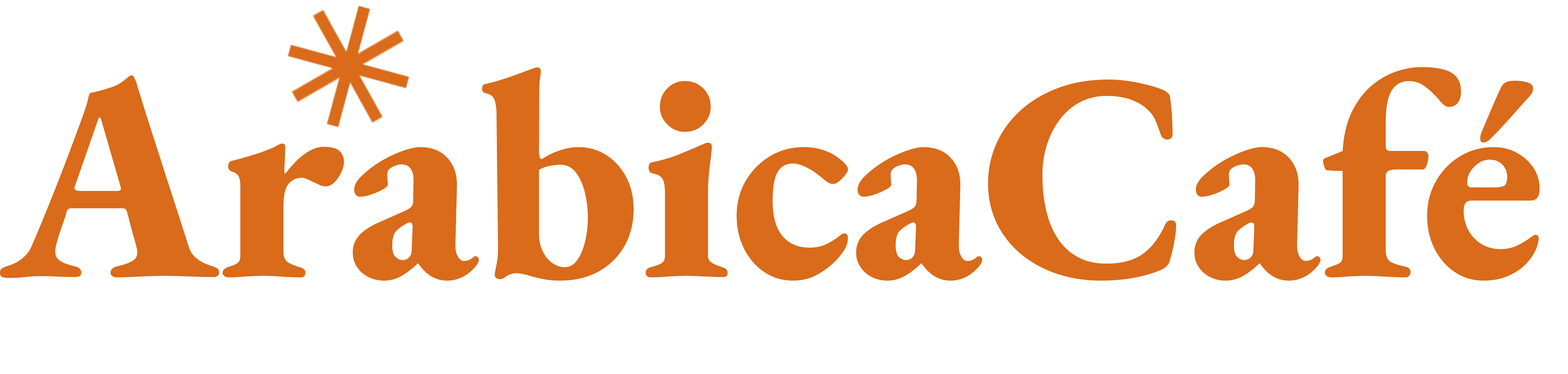
<style>
.page{position:relative;width:1568px;height:374px;background:#ffffff}
.page>*{position:absolute;margin:0}
.t1{font:296.5px "EBGaramond-ExtraBold";color:#d96b1a}
</style>
<div class="page">
<p class="t1" style="left:0px;top:67px;width:1540px;height:214px">ArabicaCafé</p>
</div>
